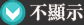
<style>
.page{position:relative;width:84px;height:25px;background:#333333}
.page>*{position:absolute;margin:0}
.t1{font:18px "RyuminPr6N-ExBold";color:#f7f6f6}
</style>
<div class="page">
<p class="t1" style="left:30px;top:3px;width:53px;height:18px">不顯示</p>
</div>
